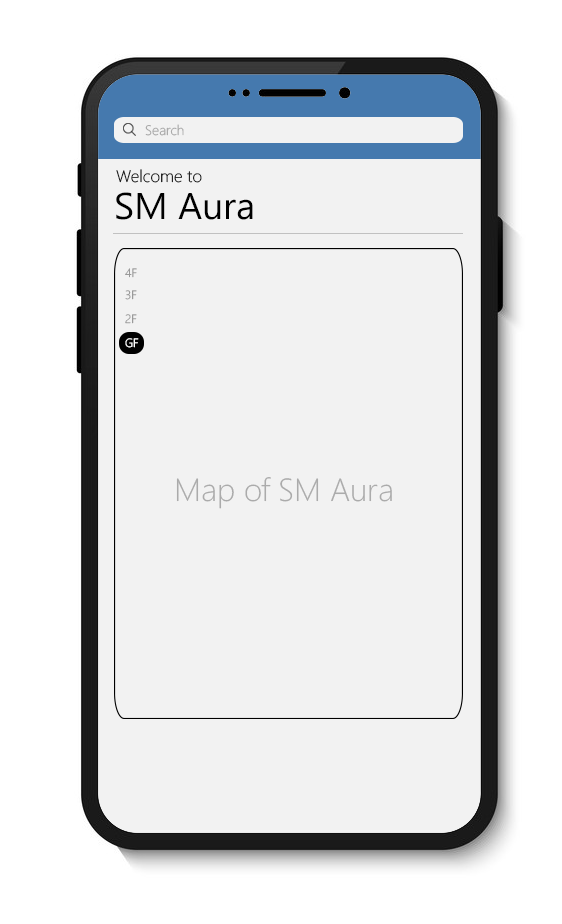
<style>
.page{position:relative;width:562px;height:924px;background:#f2f2f2}
.page>*{position:absolute;margin:0}
.t1{font:13.6px "SegoeUI-Light";color:#ababab;scale:1.03 1}
.t2{font:16.8px "SegoeUI-Light"}
.t3{font:37.3px "SegoeUI";color:#000000}
.t4{font:12px "SegoeUI-Light";color:#9a9a9a}
.t5{font:12px "SegoeUI-Light";color:#ffffff}
.t6{font:32.1px "SegoeUI-Light";color:#ababab}
</style>
<div class="page">
<p class="t1" style="left:145px;top:124px;width:39px;height:12px">Search</p>
<p class="t2" style="left:116px;top:169px;width:86px;height:14px">Welcome to</p>
<p class="t3" style="left:116px;top:192px;width:137px;height:28px">SM Aura</p>
<p class="t4" style="left:125px;top:268px;width:12px;height:10px">4F</p>
<p class="t4" style="left:125px;top:290px;width:12px;height:10px">3F</p>
<p class="t4" style="left:125px;top:314px;width:12px;height:10px">2F</p>
<p class="t5" style="left:125px;top:338px;width:14px;height:10px">GF</p>
<p class="t6" style="left:176px;top:477px;width:216px;height:32px">Map of SM Aura</p>
</div>
